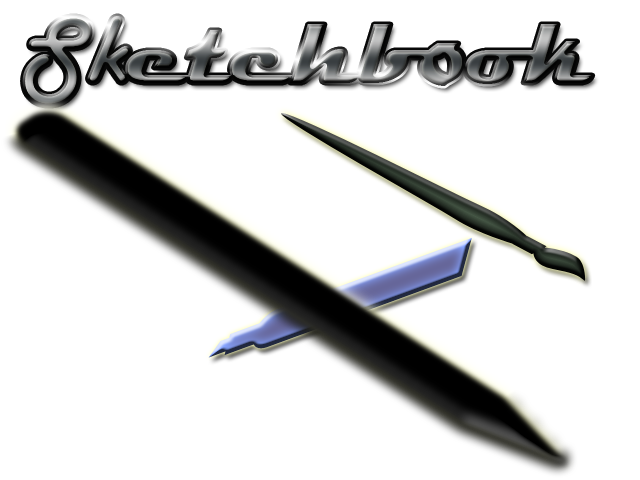
<style>
.page{position:relative;width:640px;height:480px;background:#ffffff}
.page>*{position:absolute;margin:0}
.t1{font:100px "Magneto-Bold"}
.t2{font:100px "HarlowSolid"}
.t3{font:100px "MaturaMTScriptCapitals"}
</style>
<div class="page">
<p class="t1" style="left:22px;top:16px;width:571px;height:90px"><span class="t2">Sk</span>etchb<span class="t3">o</span>ok</p>
</div>
